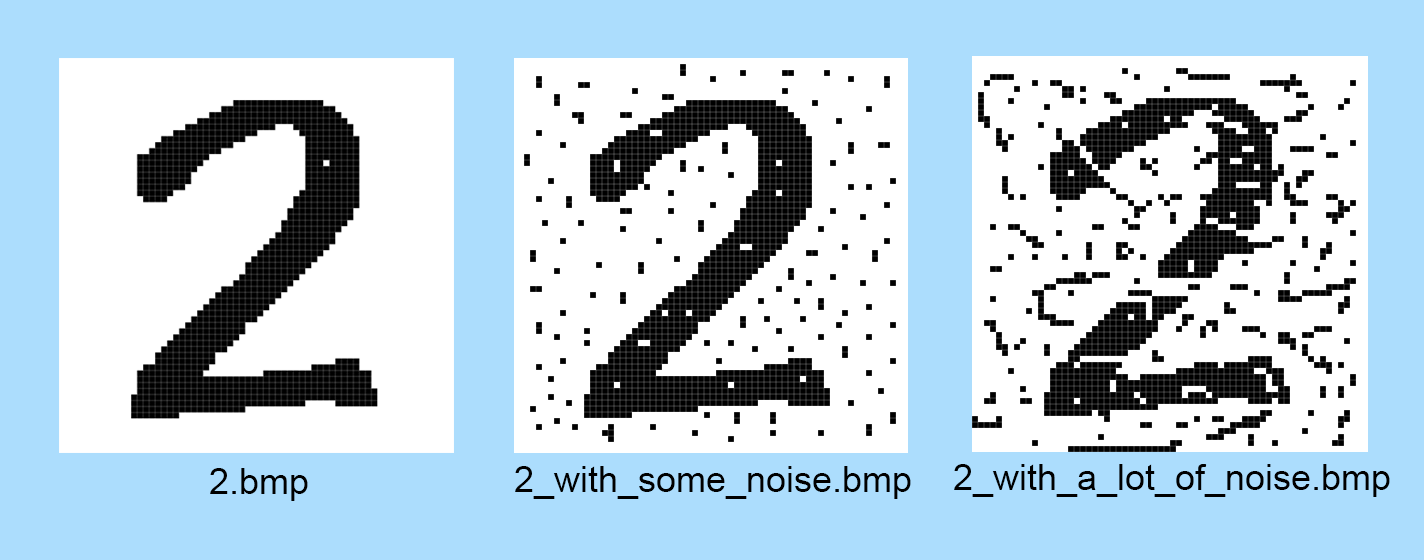
<style>
.page{position:relative;width:1424px;height:560px;background:#ffffff}
.page>*{position:absolute;margin:0}
.t1{font:36px "ArialMT";color:#000000}
</style>
<div class="page">
<p class="t1" style="left:210px;top:468px;width:98px;height:33px">2.bmp</p>
<p class="t1" style="left:515px;top:466px;width:396px;height:33px">2_with_some_noise.bmp</p>
<p class="t1" style="left:954px;top:464px;width:436px;height:33px">2_with_a_lot_of_noise.bmp</p>
</div>
